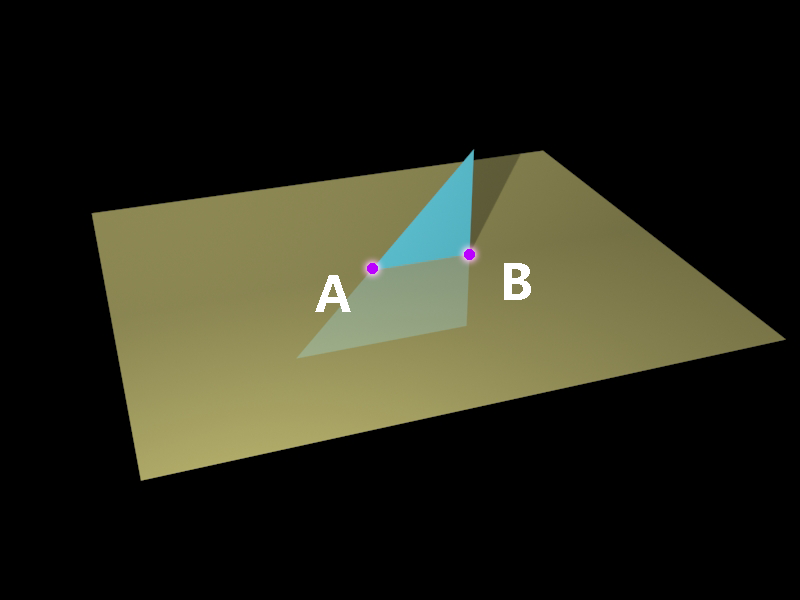
<style>
.page{position:relative;width:800px;height:600px;background:#000000}
.page>*{position:absolute;margin:0}
.t1{font:48px "MicrosoftYaHei-Bold";color:#ffffff}
</style>
<div class="page">
<p class="t1" style="left:504px;top:263px;width:27px;height:37px">B</p>
<p class="t1" style="left:315px;top:275px;width:36px;height:37px">A</p>
</div>
